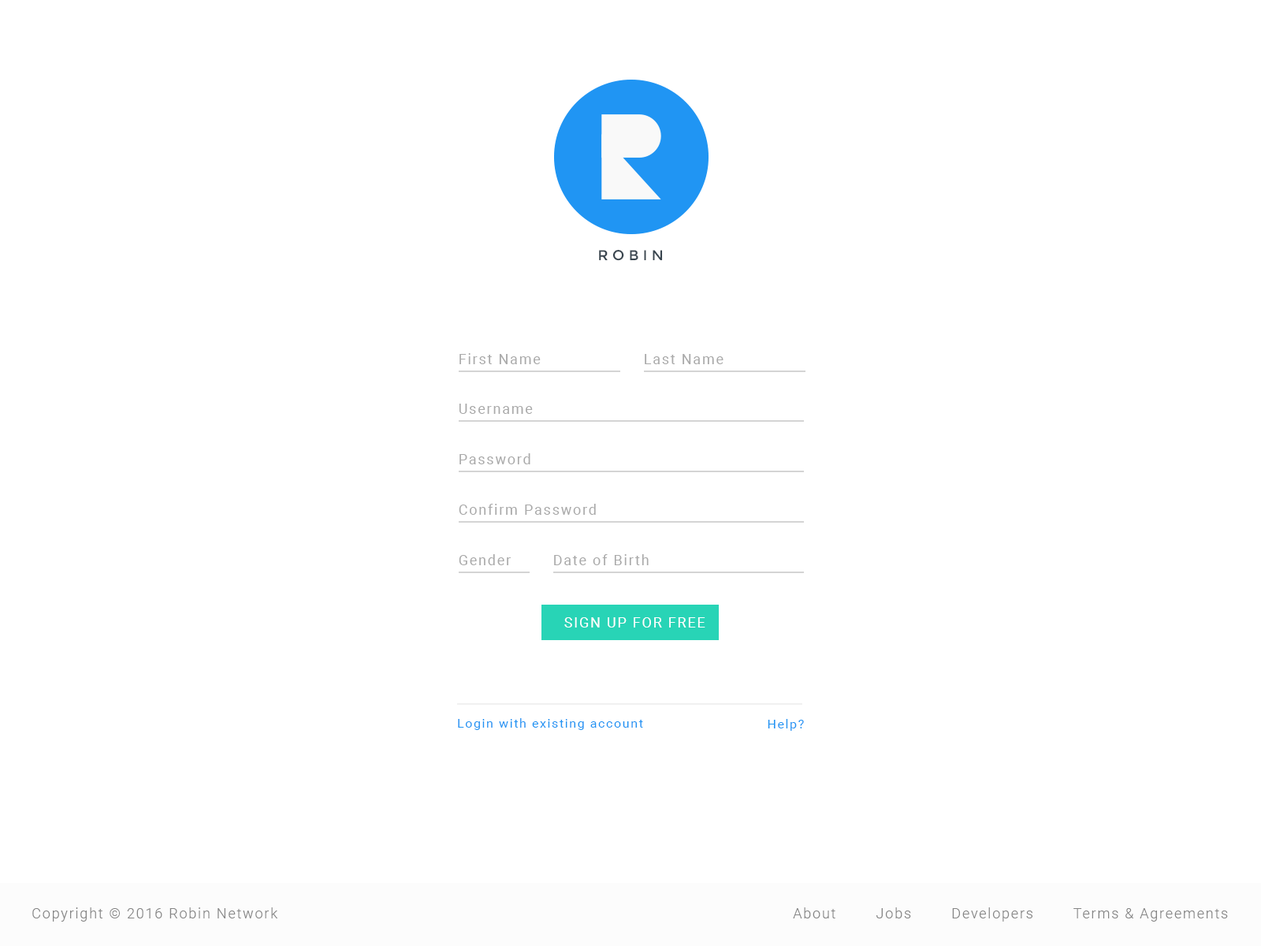
<style>
.page{position:relative;width:1261px;height:946px;background:#ffffff}
.page>*{position:absolute;margin:0}
.t1{font:14.2px "Montserrat-Regular";letter-spacing:0.3em;color:#38444e}
.t2{font:14.2px "Roboto-Regular";letter-spacing:0.1em;color:#aaaaaa}
.t3{font:14.2px "Roboto-Regular";letter-spacing:0.1em;color:#ffffff}
.t4{font:12.6px "Roboto-Regular";letter-spacing:0.1em;color:#2095f3}
.t5{font:14.2px "Roboto-Light";letter-spacing:0.1em;color:#858585}
</style>
<div class="page">
<p class="t1" style="left:599px;top:249px;width:64px;height:12px">ROBIN</p>
<p class="t2" style="left:459px;top:353px;width:82px;height:11px">First Name</p>
<p class="t2" style="left:645px;top:354px;width:78px;height:10px">Last Name</p>
<p class="t2" style="left:459px;top:403px;width:74px;height:11px">Username</p>
<p class="t2" style="left:459px;top:453px;width:71px;height:11px">Password</p>
<p class="t2" style="left:459px;top:504px;width:137px;height:11px">Confirm Password</p>
<p class="t2" style="left:459px;top:554px;width:52px;height:11px">Gender</p>
<p class="t2" style="left:554px;top:554px;width:95px;height:11px">Date of Birth</p>
<p class="t3" style="left:564px;top:617px;width:141px;height:10px">SIGN UP FOR FREE</p>
<p class="t4" style="left:458px;top:718px;width:185px;height:12px">Login with existing account</p>
<p class="t4" style="left:768px;top:719px;width:36px;height:12px">Help?</p>
<p class="t5" style="left:32px;top:907px;width:246px;height:14px">Copyright © 2016 Robin Network</p>
<p class="t5" style="left:793px;top:907px;width:435px;height:14px">About        Jobs        Developers        Terms &amp; Agreements</p>
</div>
